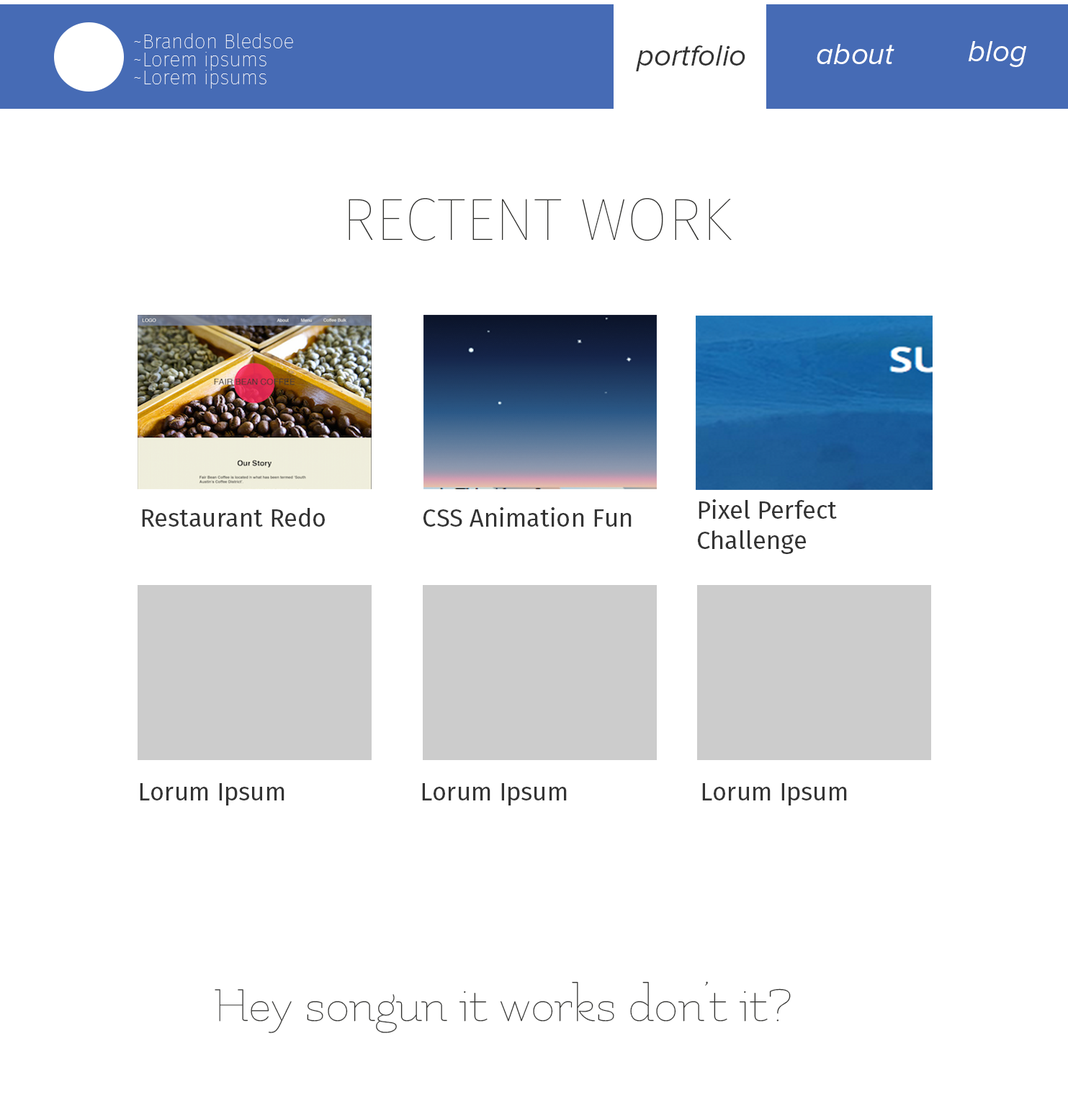
<style>
.page{position:relative;width:1068px;height:1116px;background:#ffffff}
.page>*{position:absolute;margin:0}
.t1{font:20.2px "FiraSans-Hair";color:#ffffff}
.t2{font:30.1px "ProximaNova-RegularIt";color:#ffffff}
.t3{font:30.1px "ProximaNova-RegularIt";color:#333333}
.t4{font:59.7px "FiraSans-Hair";color:#31312f}
.t5{font:24.9px "FiraSans-Regular";color:#333333}
.t6{font:51.9px "Flamenco-Light";color:#31312f}
</style>
<div class="page">
<p class="t1" style="left:134px;top:33px;width:159px;height:15px">~Brandon Bledsoe</p>
<p class="t2" style="left:968px;top:41px;width:59px;height:26px">blog</p>
<p class="t1" style="left:134px;top:52px;width:133px;height:19px">~Lorem ipsums</p>
<p class="t3" style="left:636px;top:45px;width:110px;height:26px">portfolio</p>
<p class="t2" style="left:817px;top:44px;width:78px;height:20px">about</p>
<p class="t1" style="left:134px;top:70px;width:133px;height:19px">~Lorem ipsums</p>
<p class="t4" style="left:349px;top:198px;width:383px;height:43px">RECTENT WORK</p>
<p class="t5" style="left:142px;top:508px;width:183px;height:19px">Restaurant Redo</p>
<p class="t5" style="left:424px;top:507px;width:208px;height:20px">CSS Animation Fun</p>
<p class="t5" style="left:698px;top:499px;width:139px;height:55px">Pixel Perfect <br>Challenge</p>
<p class="t5" style="left:140px;top:783px;width:145px;height:22px">Lorum Ipsum</p>
<p class="t5" style="left:422px;top:783px;width:145px;height:22px">Lorum Ipsum</p>
<p class="t5" style="left:702px;top:783px;width:145px;height:22px">Lorum Ipsum</p>
<p class="t6" style="left:215px;top:981px;width:576px;height:52px">Hey songun it works don’t it?</p>
</div>
